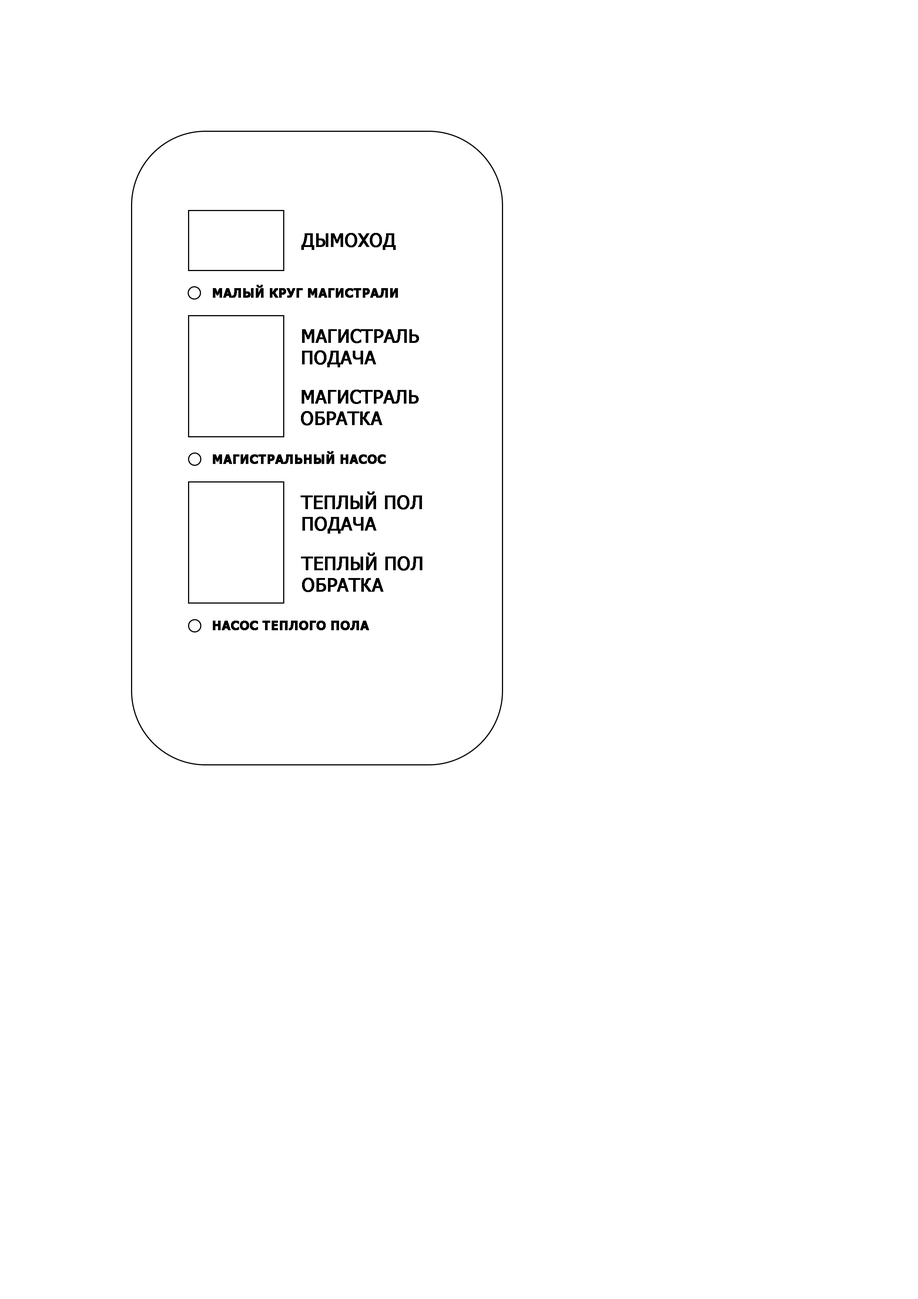
<style>
.page{position:relative;width:918px;height:1299px;background:#ffffff}
.page>*{position:absolute;margin:0}
.t1{font:18.5px "Tahoma";color:#000000;font-weight:bold}
.t2{font:12.3px "Tahoma-Bold";color:#000000;font-weight:bold}
.t3{font:18.5px/21.6px "Tahoma";color:#000000;font-weight:bold}
</style>
<div class="page">
<p class="t1" style="left:301px;top:233px;width:95px;height:17px">ДЫМОХОД</p>
<p class="t2" style="left:213px;top:285px;width:185px;height:13px">МАЛЫЙ КРУГ МАГИСТРАЛИ</p>
<p class="t3" style="left:302px;top:329px;width:117px;height:38px">МАГИСТРАЛЬ <br>ПОДАЧА</p>
<p class="t3" style="left:301px;top:389px;width:118px;height:36px">МАГИСТРАЛЬ<br>ОБРАТКА</p>
<p class="t2" style="left:213px;top:451px;width:173px;height:13px">МАГИСТРАЛЬНЫЙ НАСОС</p>
<p class="t3" style="left:301px;top:491px;width:121px;height:42px">ТЕПЛЫЙ ПОЛ<br>ПОДАЧА</p>
<p class="t3" style="left:301px;top:552px;width:121px;height:40px">ТЕПЛЫЙ ПОЛ<br>ОБРАТКА</p>
<p class="t2" style="left:213px;top:620px;width:156px;height:10px">НАСОС ТЕПЛОГО ПОЛА</p>
</div>
